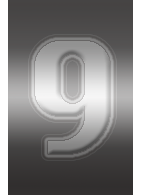
<style>
.page{position:relative;width:142px;height:195px}
.page>*{position:absolute;margin:0}
.t1{font:150px "Krungthep"}
</style>
<div class="page">
<p class="t1" style="left:35px;top:41px;width:75px;height:113px">9</p>
</div>
